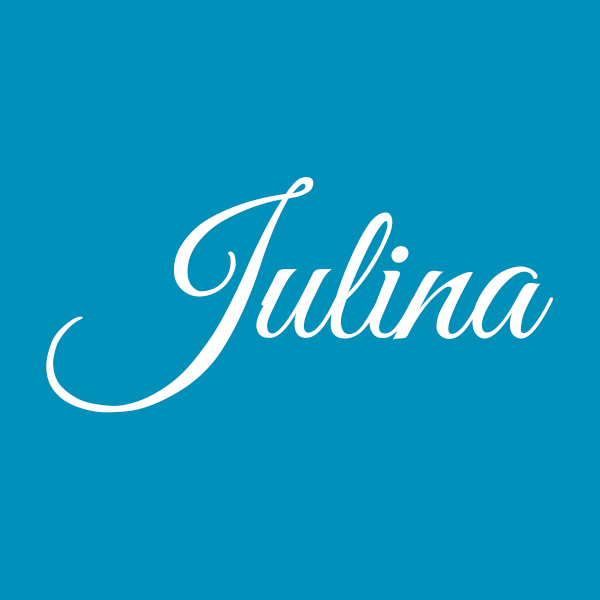
<style>
.page{position:relative;width:600px;height:600px;background:#0090b9}
.page>*{position:absolute;margin:0}
.t1{font:200px "GreatVibes-Regular";color:#ffffff}
</style>
<div class="page">
<p class="t1" style="left:46px;top:177px;width:507px;height:236px">Julina</p>
</div>
